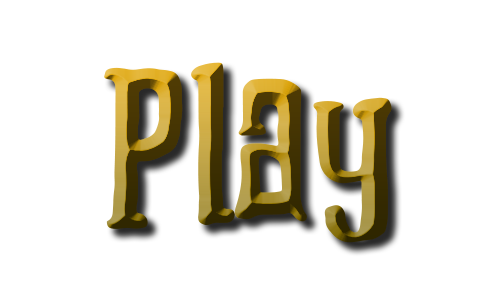
<style>
.page{position:relative;width:500px;height:300px;background:#ffffff}
.page>*{position:absolute;margin:0}
.t1{font:247.1px "Grooving"}
</style>
<div class="page">
<p class="t1" style="left:104px;top:62px;width:288px;height:181px">Play</p>
</div>
